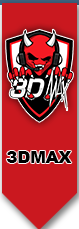
<style>
.page{position:relative;width:79px;height:229px;background:#ca181f}
.page>*{position:absolute;margin:0}
.t1{font:16.7px "Arial-Black";letter-spacing:-0.01em;color:#000000}
</style>
<div class="page">
<p class="t1" style="left:6px;top:151px;width:66px;height:12px">3DMAX</p>
</div>
